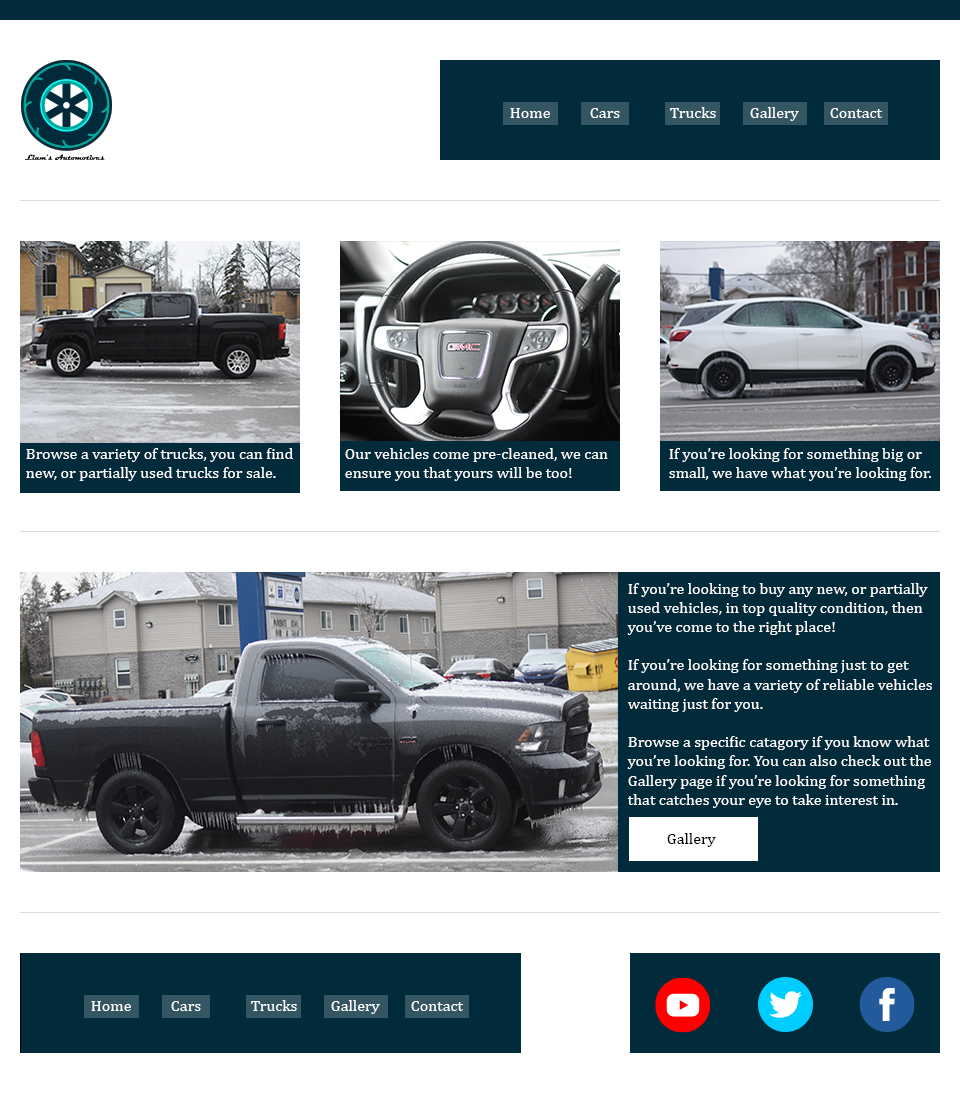
<style>
.page{position:relative;width:960px;height:1093px;background:#ffffff}
.page>*{position:absolute;margin:0}
.t1{font:16px "Cambria";color:#ffffff}
.t2{font:16px "Cambria";color:#000000}
</style>
<div class="page">
<p class="t1" style="left:510px;top:108px;width:40px;height:10px">Home</p>
<p class="t1" style="left:590px;top:108px;width:30px;height:10px">Cars</p>
<p class="t1" style="left:670px;top:107px;width:46px;height:11px">Trucks</p>
<p class="t1" style="left:750px;top:107px;width:49px;height:14px">Gallery</p>
<p class="t1" style="left:830px;top:108px;width:52px;height:10px">Contact</p>
<p class="t1" style="left:26px;top:448px;width:267px;height:33px">Browse a variety of trucks, you can find<br>new, or partially used trucks for sale.</p>
<p class="t1" style="left:345px;top:448px;width:263px;height:33px">Our vehicles come pre-cleaned, we can<br>ensure you that yours will be too!</p>
<p class="t1" style="left:669px;top:448px;width:262px;height:33px">If you’re looking for something big or<br>small, we have what you’re looking for.</p>
<p class="t1" style="left:627px;top:583px;width:305px;height:225px">If you’re looking to buy any new, or partially<br>used vehicles, in top quality condition, then<br>you’ve come to the right place!<br><br>If you’re looking for something just to get<br>around, we have a variety of reliable vehicles<br>waiting just for you.<br><br>Browse a specific catagory if you know what<br>you’re looking for. You can also check out the<br>Gallery page if you’re looking for something<br>that catches your eye to take interest in.</p>
<p class="t2" style="left:667px;top:833px;width:49px;height:14px">Gallery</p>
<p class="t1" style="left:91px;top:1001px;width:40px;height:10px">Home</p>
<p class="t1" style="left:171px;top:1001px;width:30px;height:10px">Cars</p>
<p class="t1" style="left:251px;top:1000px;width:46px;height:11px">Trucks</p>
<p class="t1" style="left:331px;top:1000px;width:49px;height:14px">Gallery</p>
<p class="t1" style="left:411px;top:1001px;width:52px;height:10px">Contact</p>
</div>
